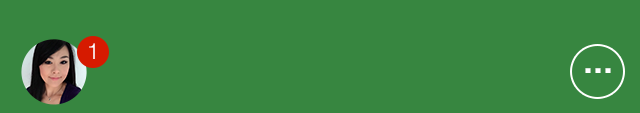
<style>
.page{position:relative;width:640px;height:113px;background:#378640}
.page>*{position:absolute;margin:0}
.t1{font:22px "HelveticaNeue-Light";letter-spacing:0.01em;color:#ffffff}
</style>
<div class="page">
<p class="t1" style="left:89px;top:43px;width:6px;height:16px">1</p>
</div>
